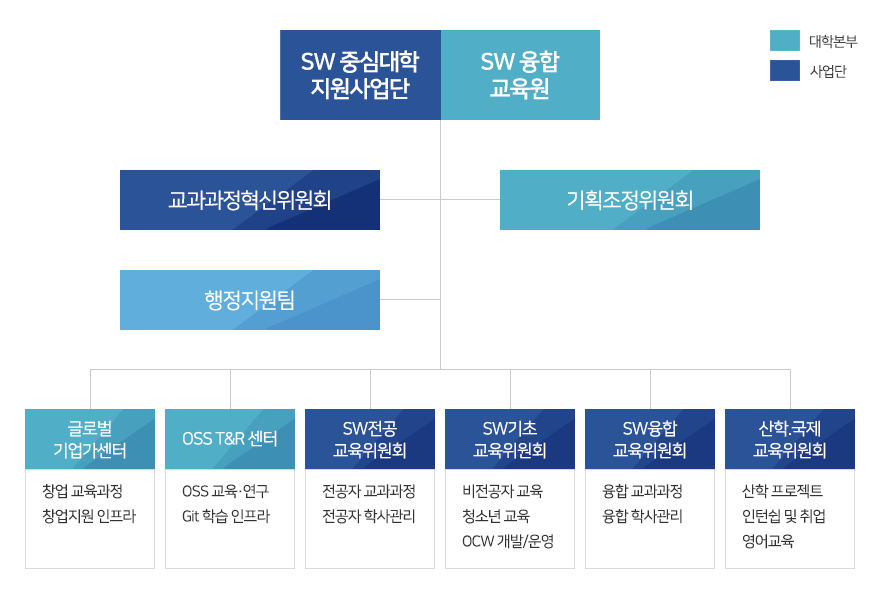
<style>
.page{position:relative;width:880px;height:600px;background:#ffffff}
.page>*{position:absolute;margin:0}
.t1{font:14px "NanumSquareR";letter-spacing:-0.05em;color:#404040}
.t2{font:23px/27px "NanumSquareB";letter-spacing:-0.05em;color:#ffffff}
.t3{font:21px "NanumSquareR";letter-spacing:-0.05em;color:#ffffff}
.t4{font:17px/22px "NanumSquareR";letter-spacing:-0.05em;color:#ffffff}
.t5{font:17px "NanumSquareR";letter-spacing:-0.05em;color:#ffffff}
.t6{font:15px/25px "NanumSquareR";letter-spacing:-0.05em;color:#333333}
</style>
<div class="page">
<p class="t1" style="left:810px;top:34px;width:48px;height:15px">대학본부</p>
<p class="t2" style="left:301px;top:50px;width:119px;height:50px;text-align:center">SW 중심대학<br>지원사업단</p>
<p class="t2" style="left:481px;top:50px;width:79px;height:50px;text-align:center">SW 융합<br>교육원</p>
<p class="t1" style="left:810px;top:65px;width:37px;height:13px">사업단</p>
<p class="t3" style="left:168px;top:190px;width:162px;height:21px">교과과정혁신위원회</p>
<p class="t3" style="left:567px;top:190px;width:125px;height:21px">기획조정위원회</p>
<p class="t3" style="left:205px;top:290px;width:89px;height:21px">행정지원팀</p>
<p class="t4" style="left:54px;top:420px;width:72px;height:39px;text-align:center">글로벌<br>기업가센터</p>
<p class="t4" style="left:333px;top:420px;width:73px;height:39px;text-align:center">SW전공<br>교육위원회</p>
<p class="t4" style="left:473px;top:420px;width:73px;height:39px;text-align:center">SW기초<br>교육위원회</p>
<p class="t4" style="left:613px;top:420px;width:73px;height:39px;text-align:center">SW융합<br>교육위원회</p>
<p class="t4" style="left:753px;top:420px;width:73px;height:39px;text-align:center">산학.국제<br>교육위원회</p>
<p class="t5" style="left:183px;top:430px;width:94px;height:17px">OSS T&amp;R 센터</p>
<p class="t6" style="left:42px;top:484px;width:94px;height:40px">창업 교육과정<br>창업지원 인프라</p>
<p class="t6" style="left:182px;top:484px;width:88px;height:40px">OSS 교육·연구<br>Git 학습 인프라</p>
<p class="t6" style="left:322px;top:484px;width:93px;height:40px">전공자 교과과정<br>전공자 학사관리</p>
<p class="t6" style="left:462px;top:484px;width:91px;height:65px">비전공자 교육<br>청소년 교육<br>OCW 개발/운영</p>
<p class="t6" style="left:602px;top:484px;width:80px;height:40px">융합 교과과정<br>융합 학사관리</p>
<p class="t6" style="left:742px;top:484px;width:83px;height:65px">산학 프로젝트<br>인턴쉽 및 취업<br>영어교육</p>
</div>
